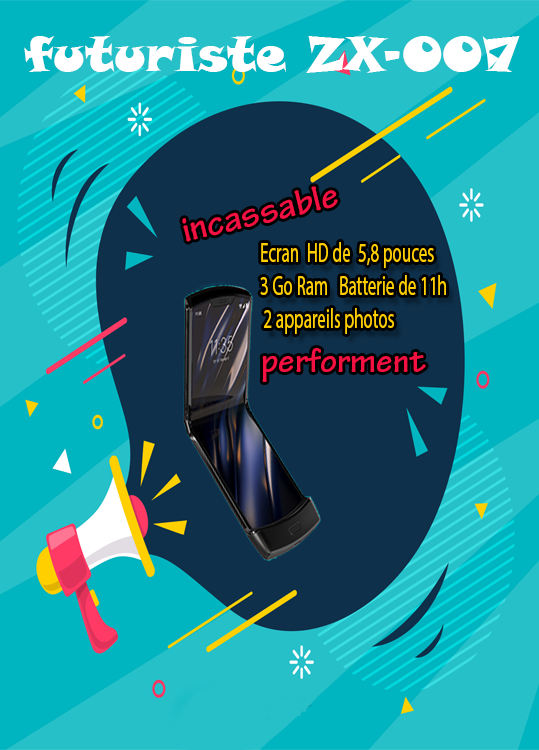
<style>
.page{position:relative;width:539px;height:750px;background:#0e304b}
.page>*{position:absolute;margin:0}
.t1{font:48px "SnapITC-Regular";color:#ffffff}
.t2{font:37px "TektonPro-Bold";color:#f31142}
.t3{font:27.5px "MyriadPro-Regular";color:#ffcf00;scale:0.62 1}
.t4{font:34.5px "TektonPro-Bold";color:#f31142}
</style>
<div class="page">
<p class="t1" style="left:24px;top:36px;width:496px;height:37px">futuriste ZX-007</p>
<p class="t2" style="left:182px;top:186px;width:156px;height:56px;rotate:-13deg">incassable</p>
<p class="t3" style="left:260px;top:242px;width:186px;height:92px">Ecran  HD de  5,8 pouces<br>3 Go Ram   Batterie de 11h<br> 2 appareils photos</p>
<p class="t4" style="left:262px;top:348px;width:164px;height:34px">performent</p>
</div>
